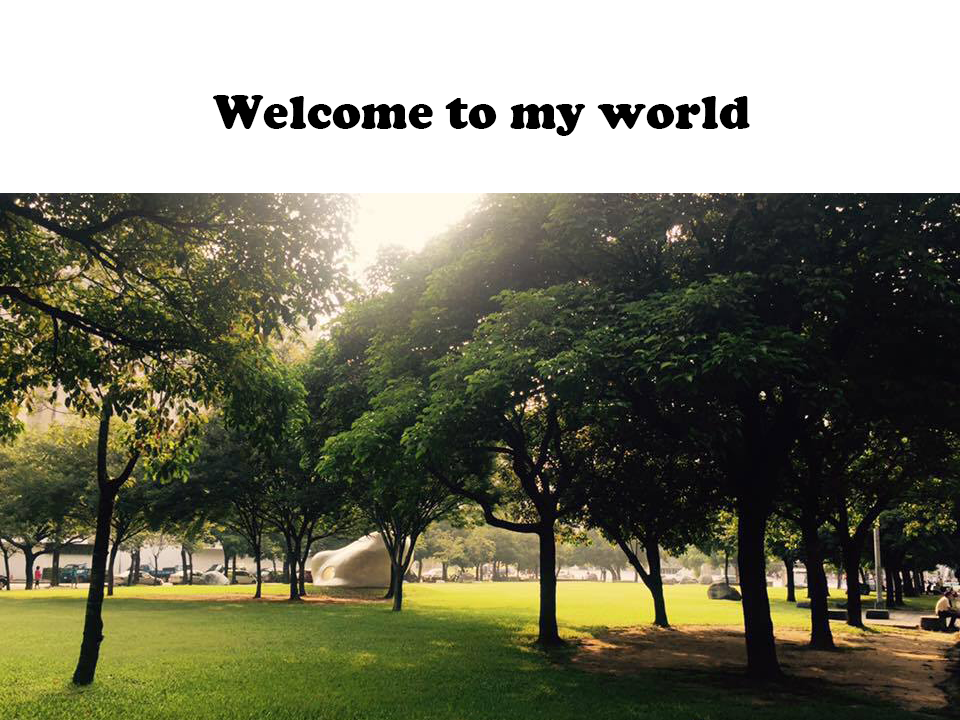
<style>
.page{position:relative;width:960px;height:720px;background:#ffffff}
.page>*{position:absolute;margin:0}
.t1{font:48px "CooperBlack";letter-spacing:0.005em;color:#000000}
</style>
<div class="page">
<p class="t1" style="left:213px;top:95px;width:537px;height:41px">Welcome to my world</p>
</div>
